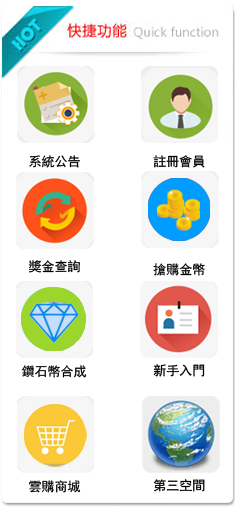
<style>
.page{position:relative;width:235px;height:509px;background:#ffffff}
.page>*{position:absolute;margin:0}
.t1{font:13px "SimHei";color:#000000}
</style>
<div class="page">
<p class="t1" style="left:29px;top:155px;width:51px;height:13px">系統公告</p>
<p class="t1" style="left:153px;top:155px;width:52px;height:13px">註冊會員</p>
<p class="t1" style="left:28px;top:260px;width:52px;height:13px">獎金查詢</p>
<p class="t1" style="left:153px;top:263px;width:52px;height:13px">搶購金幣</p>
<p class="t1" style="left:21px;top:365px;width:66px;height:13px">鑽石幣合成</p>
<p class="t1" style="left:153px;top:364px;width:52px;height:13px">新手入門</p>
<p class="t1" style="left:29px;top:480px;width:52px;height:13px">雲購商城</p>
<p class="t1" style="left:153px;top:479px;width:52px;height:13px">第三空間</p>
</div>
